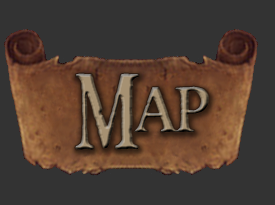
<style>
.page{position:relative;width:275px;height:205px;background:#333333}
.page>*{position:absolute;margin:0}
.t1{font:72px "RingbearerMedium"}
</style>
<div class="page">
<p class="t1" style="left:75px;top:73px;width:134px;height:77px">Map</p>
</div>
